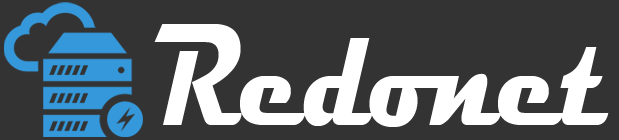
<style>
.page{position:relative;width:619px;height:140px;background:#333333}
.page>*{position:absolute;margin:0}
.t1{font:148px "Magneto-Bold";color:#ffffff;scale:0.7 1}
</style>
<div class="page">
<p class="t1" style="left:154px;top:24px;width:455px;height:103px">Redonet</p>
</div>
